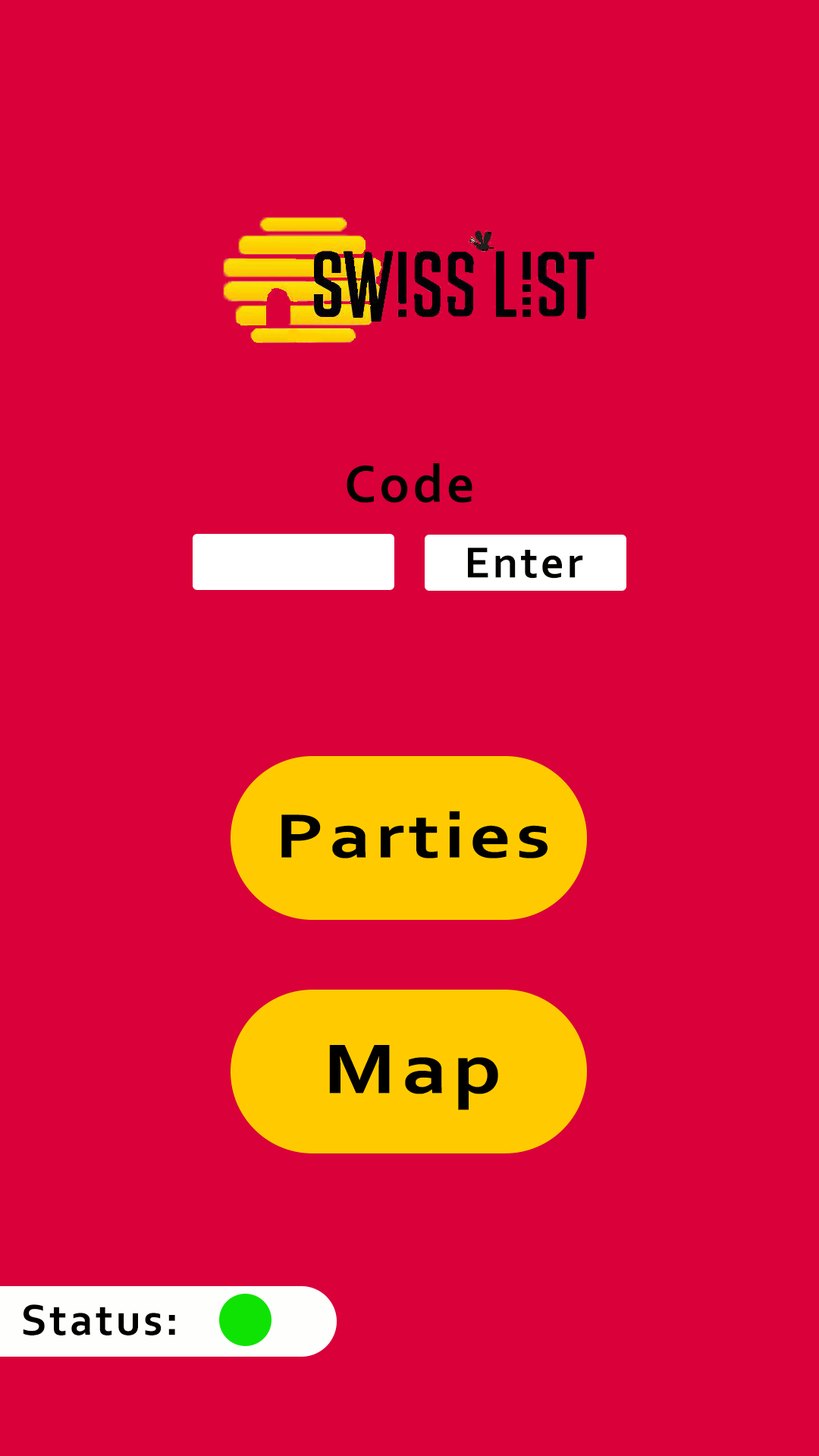
<style>
.page{position:relative;width:819px;height:1456px;background:#da003a}
.page>*{position:absolute;margin:0}
.t1{font:54.6px "Corbel-Bold";letter-spacing:0.06em;color:#010200}
.t2{font:45.5px "Corbel-Bold";letter-spacing:0.06em;color:#010200}
.t3{font:65.2px "Corbel-Bold";letter-spacing:0.06em;color:#000000;scale:1.24 1}
.t4{font:73.5px "Corbel-Bold";letter-spacing:0.06em;color:#000000;scale:1.21 1}
.t5{font:45.5px "Corbel-Bold";letter-spacing:0.06em;color:#000000}
</style>
<div class="page">
<p class="t1" style="left:347px;top:463px;width:125px;height:40px">Code</p>
<p class="t2" style="left:468px;top:548px;width:115px;height:31px">Enter</p>
<p class="t3" style="left:281px;top:811px;width:267px;height:47px">Parties</p>
<p class="t4" style="left:329px;top:1045px;width:169px;height:65px">Map</p>
<p class="t5" style="left:23px;top:1304px;width:152px;height:31px">Status:</p>
</div>
